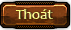
<style>
.page{position:relative;width:71px;height:30px}
.page>*{position:absolute;margin:0}
.t1{font:14.2px "Candara-Bold";letter-spacing:-0.05em;scale:1.16 1}
</style>
<div class="page">
<p class="t1" style="left:15px;top:9px;width:38px;height:10px">Thoát</p>
</div>
